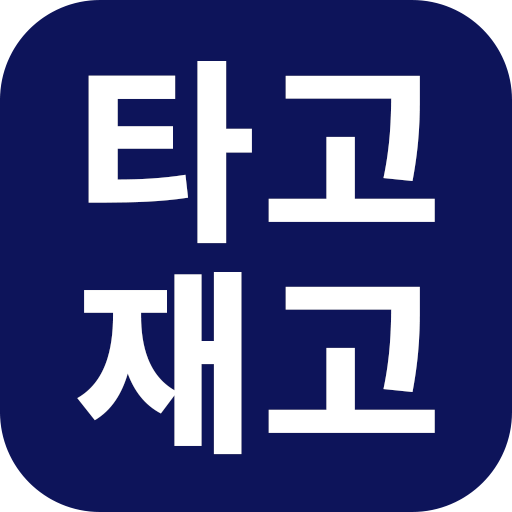
<style>
.page{position:relative;width:512px;height:512px;background:#0d145a}
.page>*{position:absolute;margin:0}
.t1{font:203px/210.8px "Pretendard-ExtraBold";letter-spacing:0.05em;color:#ffffff;text-transform:uppercase}
</style>
<div class="page">
<p class="t1" style="left:77px;top:61px;width:358px;height:394px;text-align:center">타고<br>재고</p>
</div>
